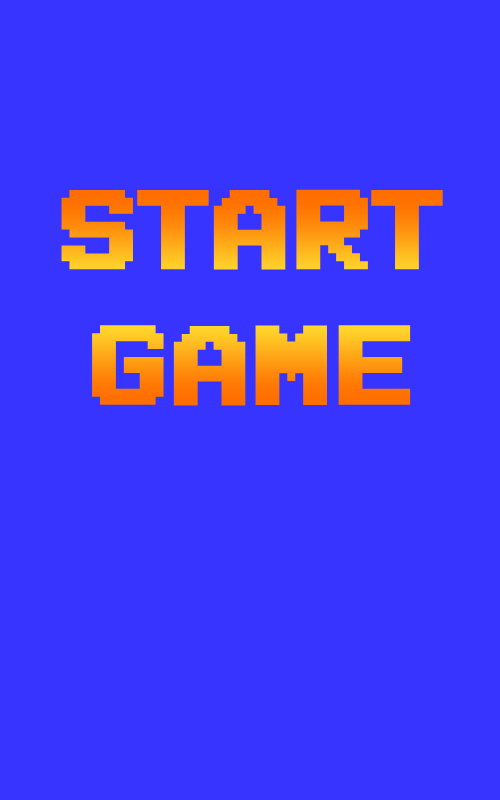
<style>
.page{position:relative;width:500px;height:800px;background:#3734ff}
.page>*{position:absolute;margin:0}
.t1{font:113px "AutomBold"}
</style>
<div class="page">
<p class="t1" style="left:61px;top:189px;width:382px;height:217px;text-align:center">Start <br>game</p>
</div>
